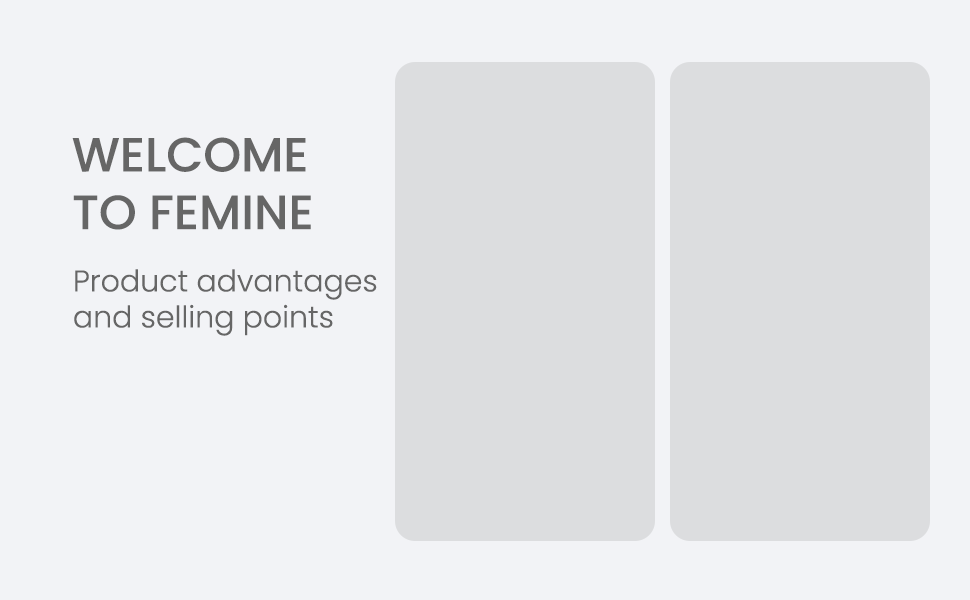
<style>
.page{position:relative;width:970px;height:600px;background:#f2f3f6}
.page>*{position:absolute;margin:0}
.t1{font:48px "Poppins-Medium";color:#666666;text-transform:uppercase}
.t2{font:30px "Poppins-Light";color:#666666}
</style>
<div class="page">
<p class="t1" style="left:72px;top:137px;width:239px;height:93px">Welcome<br>To Femine</p>
<p class="t2" style="left:74px;top:269px;width:303px;height:67px">Product advantages <br>and selling points</p>
</div>
